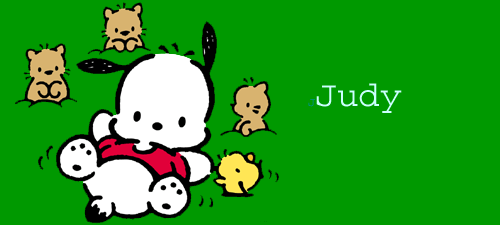
<style>
.page{position:relative;width:500px;height:225px;background:#009900}
.page>*{position:absolute;margin:0}
.t1{font:36px "Courier";color:#ccffff}
.t2{font:12px "Courier";color:#009099}
</style>
<div class="page">
<p class="t1" style="left:308px;top:83px;width:94px;height:30px"><span class="t2">J</span>Judy</p>
</div>
